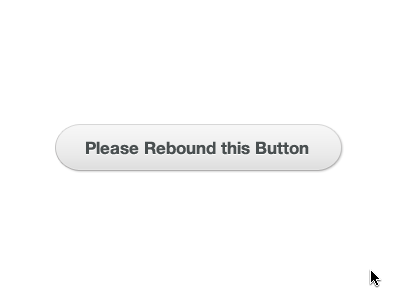
<style>
.page{position:relative;width:400px;height:300px;background:#ffffff}
.page>*{position:absolute;margin:0}
.t1{font:17px "HelveticaNeue-Bold";color:#494f50}
</style>
<div class="page">
<p class="t1" style="left:86px;top:141px;width:223px;height:14px">Please Rebound this Button</p>
</div>
